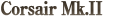
<style>
.page{position:relative;width:121px;height:16px;background:#ffffff}
.page>*{position:absolute;margin:0}
.t1{font:18px "RyuminPro-ExBold";letter-spacing:-0.06em;color:#4a3f32;font-weight:bold;scale:0.9 1}
</style>
<div class="page">
<p class="t1" style="left:1px;top:1px;width:102px;height:15px">Corsair Mk.II</p>
</div>
